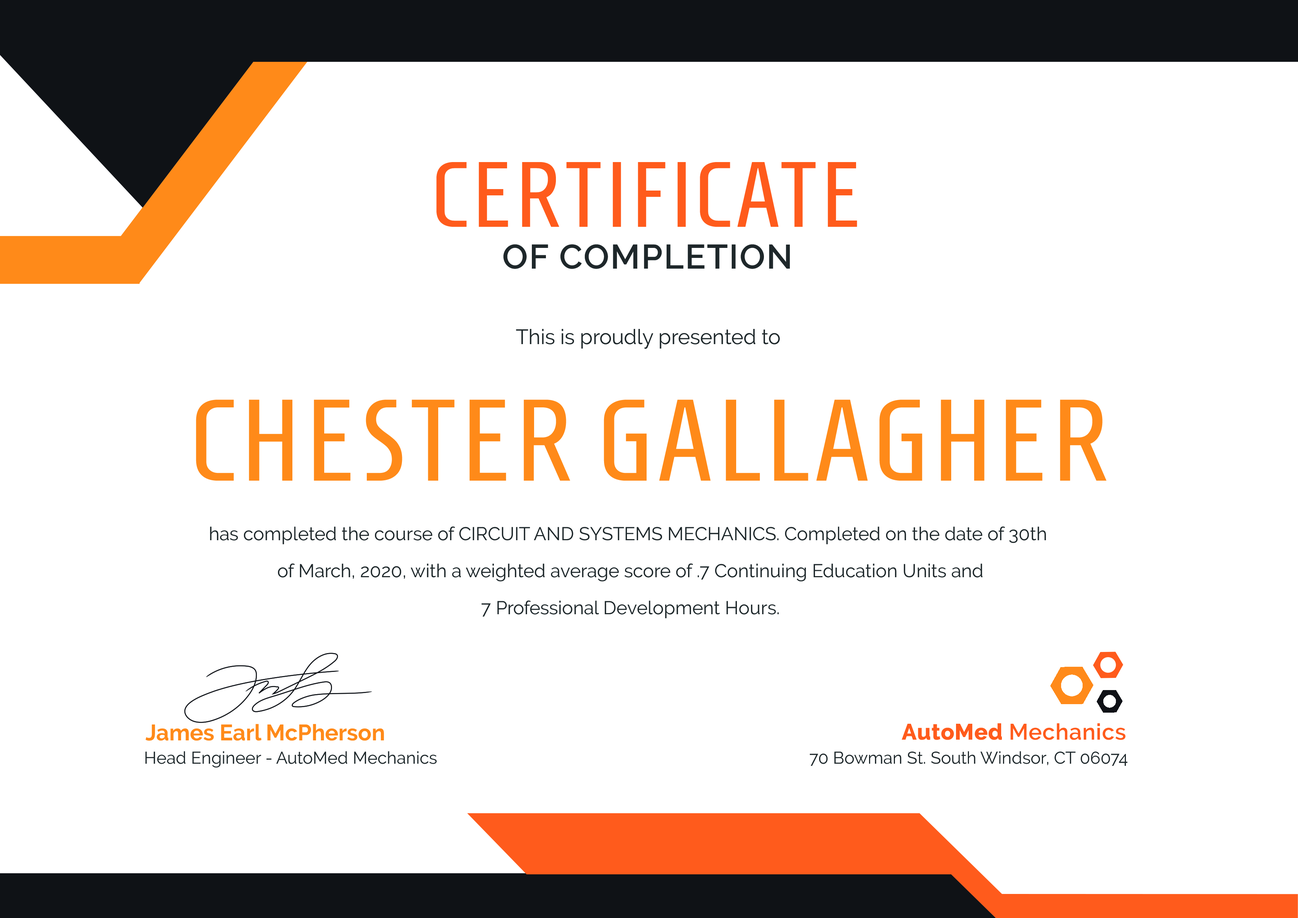
<style>
.page{position:relative;width:1298px;height:918px;background:#ffffff}
.page>*{position:absolute;margin:0}
.t1{font:92.5px "Homenaje-Regular";letter-spacing:0.04em;color:#ff5b1c}
.t2{font:33.9px "Raleway-SemiBold";letter-spacing:0.04em;color:#1e272a}
.t3{font:20.8px "Raleway-Regular";color:#1e272a}
.t4{font:115.7px "Homenaje-Regular";letter-spacing:0.04em;color:#ff8a19;text-transform:uppercase}
.t5{font:18.5px/37px "Raleway-Regular";color:#1e272a}
.t6{font:22.4px "Raleway-Bold";color:#ff8a19}
.t7{font:22.4px "Raleway-SemiBold";letter-spacing:0.02em;color:#ff5b1c}
.t8{font:22.4px "Raleway-ExtraBold";letter-spacing:0.02em;color:#ff5b1c}
.t9{font:17px "Raleway-Regular";color:#1e272a}
</style>
<div class="page">
<p class="t1" style="left:436px;top:162px;width:421px;height:65px">CERTIFICATE</p>
<p class="t2" style="left:503px;top:244px;width:287px;height:25px">OF COMPLETION</p>
<p class="t3" style="left:516px;top:329px;width:264px;height:20px">This is proudly presented to</p>
<p class="t4" style="left:196px;top:400px;width:911px;height:81px">Chester Gallagher</p>
<p class="t5" style="left:210px;top:527px;width:836px;height:92px;text-align:center">has completed the course of CIRCUIT AND SYSTEMS MECHANICS. Completed on the date of 30th <br>of March, 2020, with a weighted average score of .7 Continuing Education Units and<br>7 Professional Development Hours.</p>
<p class="t6" style="left:145px;top:724px;width:239px;height:17px">James Earl McPherson</p>
<p class="t7" style="left:902px;top:723px;width:224px;height:17px"><span class="t8">AutoMed </span>Mechanics</p>
<p class="t9" style="left:145px;top:752px;width:292px;height:16px">Head Engineer - AutoMed Mechanics</p>
<p class="t9" style="left:810px;top:752px;width:318px;height:14px">70 Bowman St. South Windsor, CT 06074</p>
</div>
